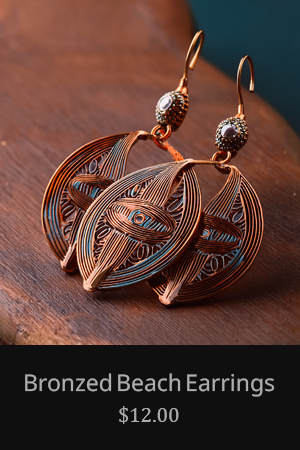
<style>
.page{position:relative;width:300px;height:450px;background:#0f0f0f}
.page>*{position:absolute;margin:0}
.t1{font:23px "SansSerifCollection";color:#adadad}
.t2{font:21px "Cambria";color:#adadad}
</style>
<div class="page">
<p class="t1" style="left:25px;top:373px;width:250px;height:24px">Bronzed Beach Earrings</p>
<p class="t2" style="left:119px;top:406px;width:60px;height:18px">$12.00</p>
</div>
